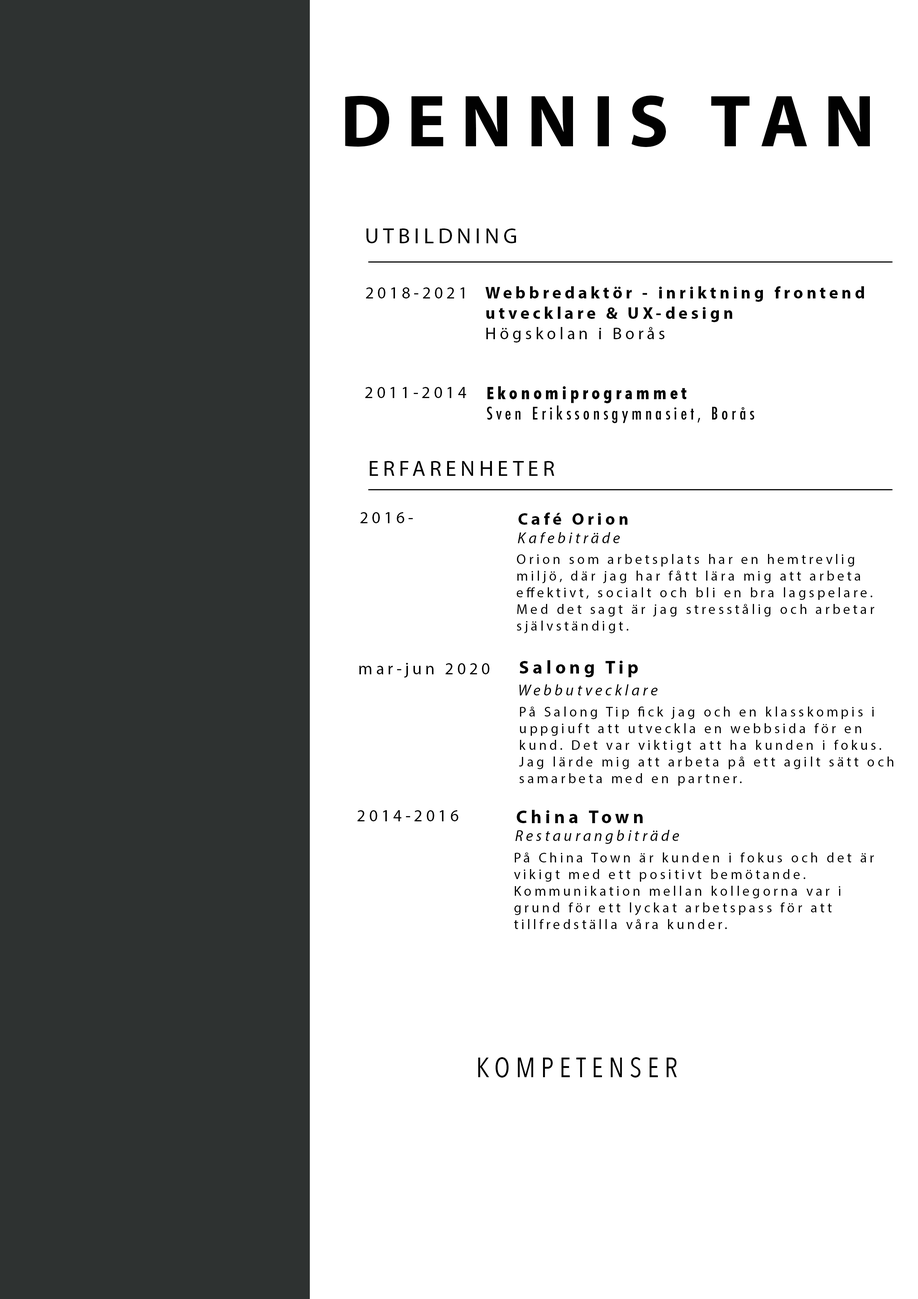
<style>
.page{position:relative;width:918px;height:1299px;background:#ffffff}
.page>*{position:absolute;margin:0}
.t1{font:74px "MyriadPro-Bold";letter-spacing:0.2em;color:#010101}
.t2{font:21.6px "MyriadPro-Regular";letter-spacing:0.2em;color:#010101}
.t3{font:17px "MyriadPro-Regular";letter-spacing:0.2em;color:#010101}
.t4{font:17px "MyriadPro-Bold";letter-spacing:0.2em;color:#000000}
.t5{font:17px "MyriadPro-Regular";letter-spacing:0.2em;color:#000000}
.t6{font:17px "Futura-CondensedMedium";letter-spacing:0.2em;color:#000000}
.t7{font:17px "AvenirNextCondensed-Bold";letter-spacing:0.2em;color:#000000}
.t8{font:15.4px "MyriadPro-It";letter-spacing:0.2em;color:#000000}
.t9{font:13.9px "MyriadPro-Regular";letter-spacing:0.2em;color:#000000}
.t10{font:18.5px "MyriadPro-Bold";letter-spacing:0.2em;color:#000000}
.t11{font:27.8px "AvenirNextCondensed-Regular";letter-spacing:0.2em;color:#010101}
</style>
<div class="page">
<p class="t1" style="left:345px;top:96px;width:525px;height:51px">DENNIS TAN</p>
<p class="t2" style="left:367px;top:228px;width:149px;height:15px">UTBILDNING</p>
<p class="t3" style="left:366px;top:287px;width:98px;height:11px">2018-2021</p>
<p class="t4" style="left:485px;top:286px;width:379px;height:56px">Webbredaktör - inriktning frontend utvecklare &amp; UX-design<br><span class="t5">Högskolan i Borås</span></p>
<p class="t5" style="left:365px;top:387px;width:101px;height:11px">2011-2014</p>
<p class="t6" style="left:487px;top:386px;width:268px;height:37px"><span class="t7">Ekonomiprogrammet<br></span>Sven Erikssonsgymnasiet, Borås</p>
<p class="t2" style="left:370px;top:461px;width:185px;height:15px">ERFARENHETER</p>
<p class="t5" style="left:360px;top:512px;width:53px;height:11px">2016-</p>
<p class="t4" style="left:518px;top:512px;width:110px;height:13px">Café Orion</p>
<p class="t8" style="left:518px;top:532px;width:102px;height:11px">Kafebiträde</p>
<p class="t9" style="left:517px;top:554px;width:357px;height:79px">Orion som arbetsplats har en hemtrevlig miljö, där jag har fått lära mig att arbeta effektivt, socialt och bli en bra lagspelare. Med det sagt är jag stresstålig och arbetar självständigt.</p>
<p class="t5" style="left:359px;top:663px;width:130px;height:15px">mar-jun 2020</p>
<p class="t10" style="left:520px;top:660px;width:118px;height:17px">Salong Tip</p>
<p class="t8" style="left:519px;top:684px;width:139px;height:11px">Webbutvecklare</p>
<p class="t9" style="left:519px;top:706px;width:375px;height:80px">På Salong Tip fick jag och en klasskompis i uppgiuft att utveckla en webbsida för en kund. Det var viktigt att ha kunden i fokus. Jag lärde mig att arbeta på ett agilt sätt och samarbeta med en partner.</p>
<p class="t10" style="left:517px;top:810px;width:126px;height:13px">China Town</p>
<p class="t8" style="left:515px;top:830px;width:164px;height:14px">Restaurangbiträde</p>
<p class="t9" style="left:514px;top:852px;width:360px;height:77px">På China Town är kunden i fokus och det är vikigt med ett positivt bemötande. Kommunikation mellan kollegorna var i grund för ett lyckat arbetspass för att tillfredställa våra kunder.</p>
<p class="t11" style="left:478px;top:1057px;width:199px;height:20px">KOMPETENSER</p>
</div>
